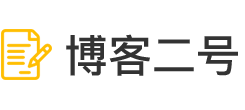
<style>
.page{position:relative;width:245px;height:110px;background:#ffffff}
.page>*{position:absolute;margin:0}
.t1{font:44px "PingFangTC-Medium";color:#333333}
</style>
<div class="page">
<p class="t1" style="left:66px;top:34px;width:172px;height:42px">博客二号</p>
</div>
